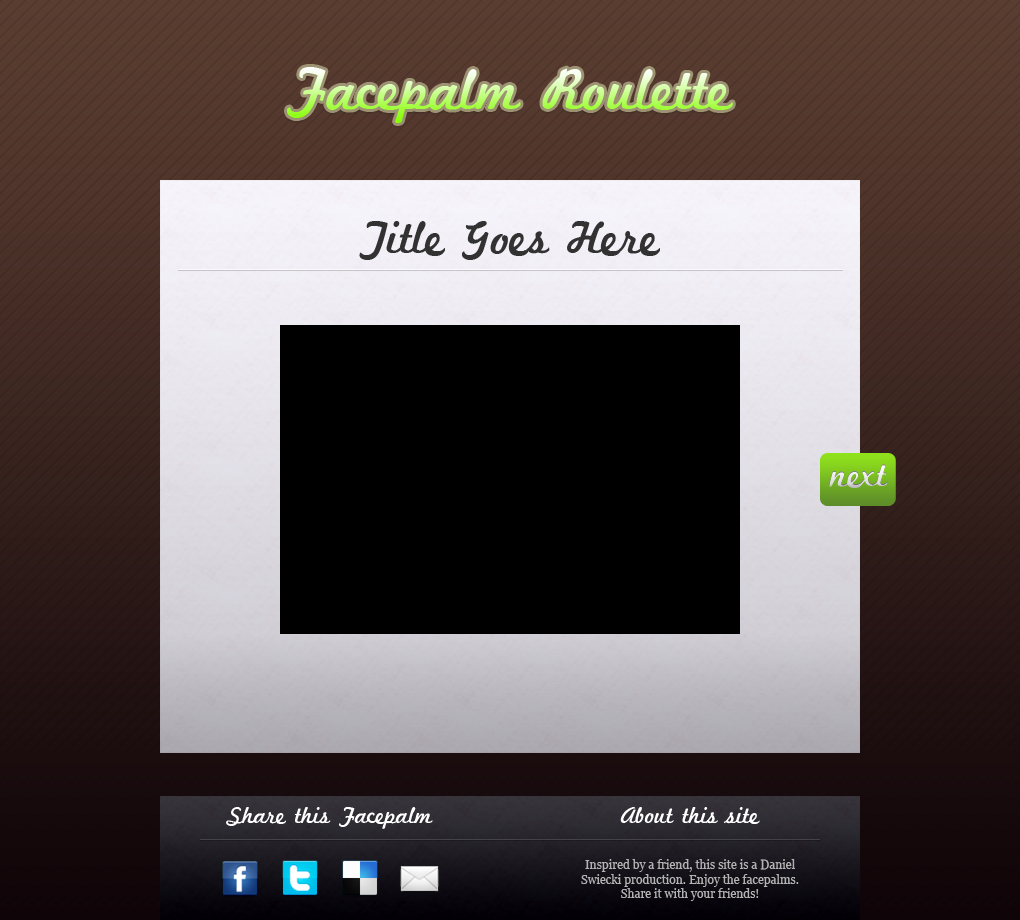
<style>
.page{position:relative;width:1020px;height:920px}
.page>*{position:absolute;margin:0}
.t1{font:60px "MarketingScript"}
.t2{font:48px "MarketingScript";color:#323232}
.t3{font:36.4px "MarketingScript"}
.t4{font:24px "MarketingScript";color:#ffffff}
.t5{font:12px "Georgia";color:#b3b3b3}
</style>
<div class="page">
<p class="t1" style="left:287px;top:67px;width:446px;height:56px">Facepalm Roulette</p>
<p class="t2" style="left:359px;top:221px;width:301px;height:39px">Title Goes Here</p>
<p class="t3" style="left:829px;top:464px;width:59px;height:24px">next</p>
<p class="t4" style="left:226px;top:807px;width:207px;height:22px">Share this Facepalm</p>
<p class="t4" style="left:620px;top:807px;width:140px;height:17px">About this site</p>
<p class="t5" style="left:581px;top:859px;width:218px;height:42px;text-align:center">Inspired by a friend, this site is a Daniel Swiecki production. Enjoy the facepalms. Share it with your friends!</p>
</div>
